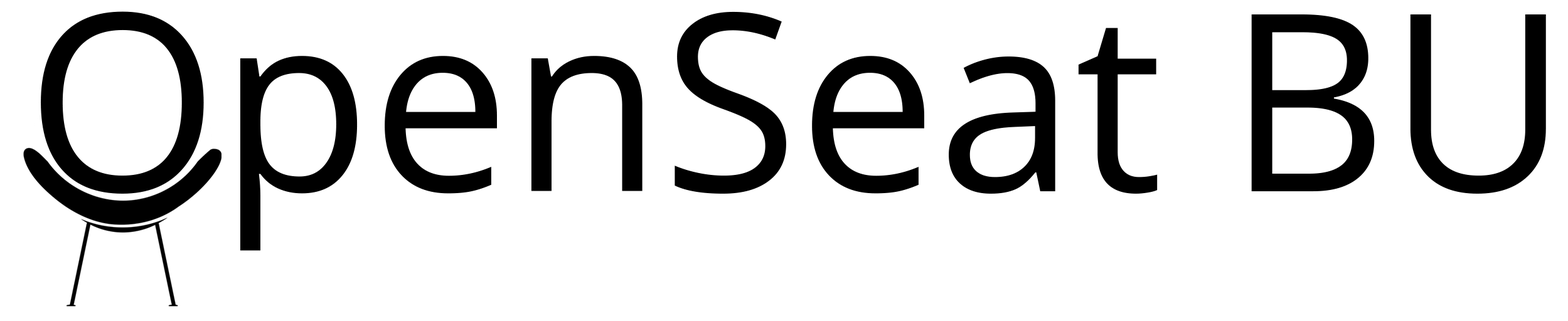
<style>
.page{position:relative;width:1568px;height:321px;background:#ffffff}
.page>*{position:absolute;margin:0}
.t1{font:247.9px "OpenSans";color:#000000}
</style>
<div class="page">
<p class="t1" style="left:41px;top:11px;width:1505px;height:240px">OpenSeat BU</p>
</div>
